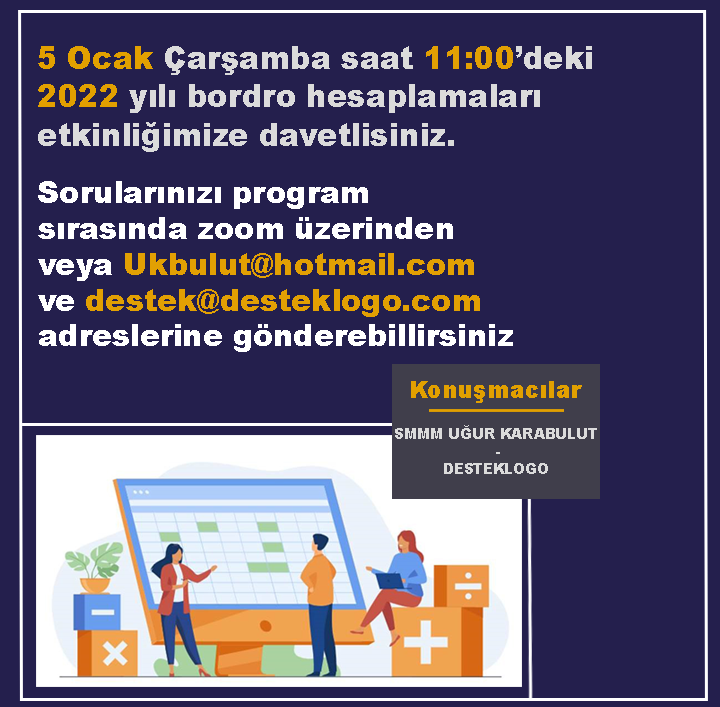
<style>
.page{position:relative;width:720px;height:707px;background:#241f4d}
.page>*{position:absolute;margin:0}
.t1{font:32px "Arial-Black";color:#dbdbdb;scale:0.94 1}
.t2{font:32px "Arial-Black";color:#e2a000;scale:0.94 1}
.t3{font:32px "Arial-Black";color:#e2a003;scale:0.94 1}
.t4{font:29.9px "Arial-Black";color:#ffffff}
.t5{font:29.9px "Arial-Black";color:#e2a003}
.t6{font:24px "Arial-Black";color:#e2a000;scale:0.95 1}
.t7{font:14.5px "Arial-Black";color:#dbdbdb;scale:0.95 1}
</style>
<div class="page">
<p class="t1" style="left:38px;top:46px;width:554px;height:106px"><span class="t2">5 Ocak</span> Çarşamba saat <span class="t3">11:00</span>’deki<br><span class="t2">2022</span> yılı bordro hesaplamaları<br>etkinliğimize davetlisiniz.</p>
<p class="t4" style="left:38px;top:181px;width:475px;height:171px">Sorularınızı program<br>sırasında zoom üzerinden<br>veya <span class="t5">Ukbulut@hotmail.com<br></span>ve <span class="t5">destek@desteklogo.com<br></span>adreslerine gönderebillirsiniz</p>
<p class="t6" style="left:411px;top:381px;width:171px;height:22px">Konuşmacılar</p>
<p class="t7" style="left:395px;top:425px;width:202px;height:49px">SMMM UĞUR KARABULUT<br>                      -<br>           DESTEKLOGO</p>
<p class="t7" style="left:395px;top:425px;width:202px;height:49px">SMMM UĞUR KARABULUT<br>                      -<br>           DESTEKLOGO</p>
</div>
